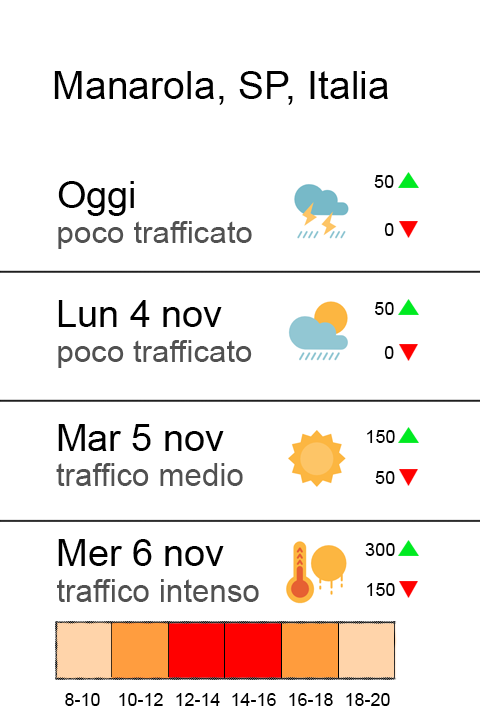
<style>
.page{position:relative;width:480px;height:720px;background:#ffffff}
.page>*{position:absolute;margin:0}
.t1{font:39.3px "ArialMT";color:#000000}
.t2{font:37.7px "ArialMT";color:#000000}
.t3{font:18.4px "ArialMT";color:#000000}
.t4{font:31.4px "ArialMT";color:#515151}
.t5{font:37.8px "ArialMT";color:#000000}
.t6{font:31.5px "ArialMT";color:#515151}
.t7{font:38px "ArialMT";color:#000000}
.t8{font:31.6px "ArialMT";color:#515151}
.t9{font:31.7px "ArialMT";color:#515151}
.t10{font:18px "ArialMT";color:#000000}
</style>
<div class="page">
<p class="t1" style="left:54px;top:71px;width:334px;height:34px">Manarola, SP, Italia</p>
<p class="t2" style="left:58px;top:181px;width:76px;height:35px">Oggi</p>
<p class="t3" style="left:374px;top:175px;width:20px;height:13px">50</p>
<p class="t4" style="left:58px;top:221px;width:194px;height:28px">poco trafficato</p>
<p class="t3" style="left:384px;top:223px;width:10px;height:13px">0</p>
<p class="t5" style="left:58px;top:300px;width:164px;height:27px">Lun 4 nov</p>
<p class="t3" style="left:375px;top:302px;width:19px;height:13px">50</p>
<p class="t6" style="left:58px;top:340px;width:194px;height:28px">poco trafficato</p>
<p class="t3" style="left:384px;top:346px;width:10px;height:13px">0</p>
<p class="t7" style="left:58px;top:424px;width:166px;height:27px">Mar 5 nov</p>
<p class="t3" style="left:367px;top:430px;width:28px;height:13px">150</p>
<p class="t8" style="left:56px;top:463px;width:187px;height:23px">traffico medio</p>
<p class="t3" style="left:375px;top:471px;width:20px;height:13px">50</p>
<p class="t7" style="left:58px;top:539px;width:166px;height:27px">Mer 6 nov</p>
<p class="t3" style="left:365px;top:543px;width:30px;height:13px">300</p>
<p class="t9" style="left:57px;top:579px;width:202px;height:23px">traffico intenso</p>
<p class="t3" style="left:367px;top:583px;width:28px;height:13px">150</p>
<p class="t10" style="left:65px;top:693px;width:35px;height:13px">8-10</p>
<p class="t10" style="left:119px;top:693px;width:44px;height:13px">10-12</p>
<p class="t10" style="left:176px;top:693px;width:44px;height:13px">12-14</p>
<p class="t10" style="left:232px;top:693px;width:44px;height:13px">14-16</p>
<p class="t10" style="left:289px;top:693px;width:44px;height:13px">16-18</p>
<p class="t10" style="left:346px;top:693px;width:44px;height:13px">18-20</p>
</div>
